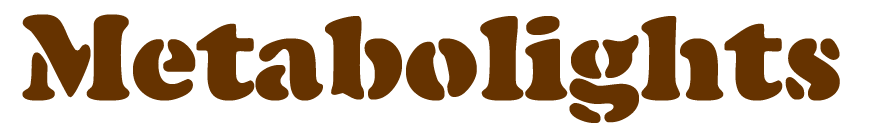
<style>
.page{position:relative;width:873px;height:130px;background:#ffffff}
.page>*{position:absolute;margin:0}
.t1{font:124.5px "Ellis";color:#663300}
</style>
<div class="page">
<p class="t1" style="left:22px;top:14px;width:818px;height:109px">Metabolights</p>
</div>
